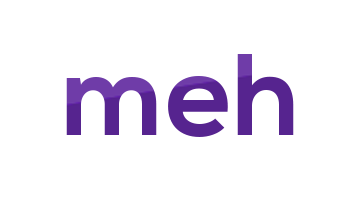
<style>
.page{position:relative;width:362px;height:198px;background:#ffffff}
.page>*{position:absolute;margin:0}
.t1{font:116.2px "NexaBold";color:#56248f}
</style>
<div class="page">
<p class="t1" style="left:66px;top:54px;width:228px;height:83px">meh</p>
</div>
